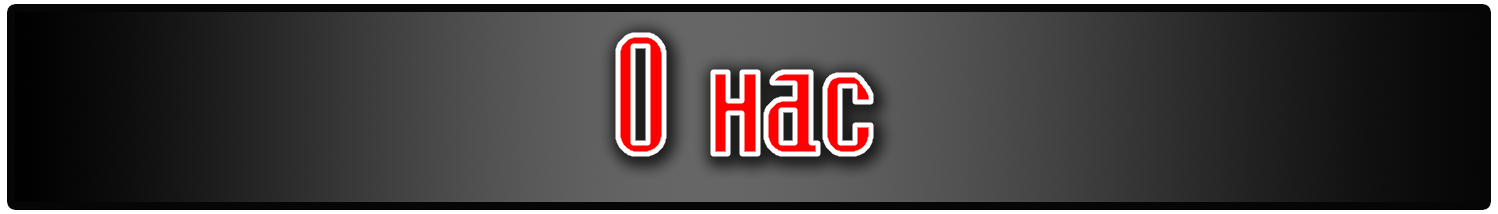
<style>
.page{position:relative;width:1498px;height:214px}
.page>*{position:absolute;margin:0}
.t1{font:156.7px "Bedrock-Cyr-Regular"}
</style>
<div class="page">
<p class="t1" style="left:618px;top:35px;width:253px;height:119px">О нас</p>
</div>
